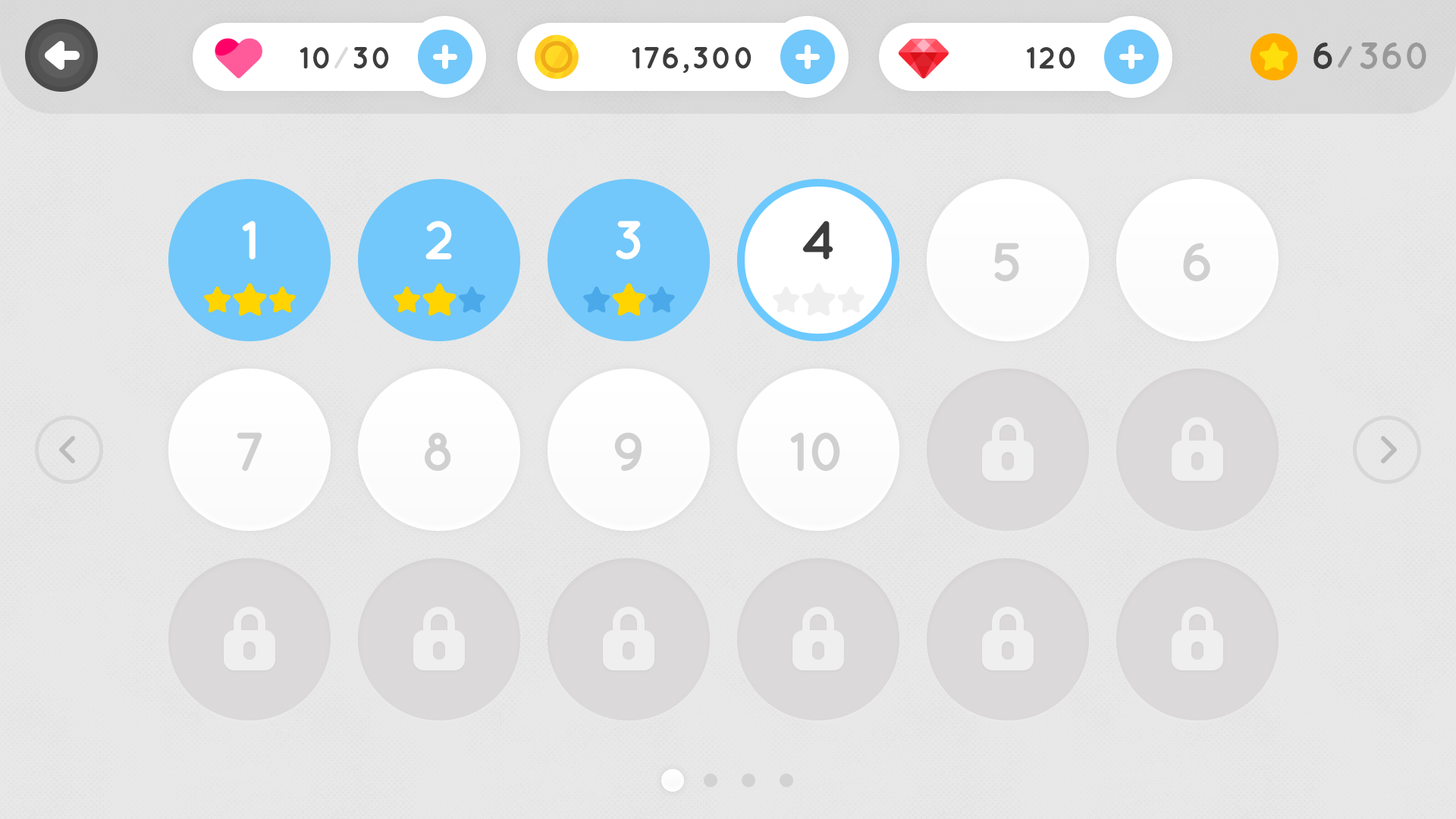
<style>
.page{position:relative;width:1456px;height:819px;background:#e8e8e8}
.page>*{position:absolute;margin:0}
.t1{font:30.3px "Quicksand-Bold";color:#3d3d3d}
.t2{font:37.9px "Quicksand-Bold";color:#3c3c3c}
.t3{font:37.9px "Quicksand-Bold";color:#999999}
.t4{font:54.6px "Quicksand-Bold";color:#ffffff}
.t5{font:54.6px "Quicksand-Bold";color:#3d3d3d}
.t6{font:54.6px "Quicksand-Bold";color:#d0d0d0}
</style>
<div class="page">
<p class="t1" style="left:300px;top:47px;width:89px;height:22px">10  30</p>
<p class="t1" style="left:632px;top:47px;width:119px;height:27px">176,300</p>
<p class="t1" style="left:1027px;top:47px;width:48px;height:22px">120</p>
<p class="t2" style="left:1313px;top:42px;width:19px;height:27px">6</p>
<p class="t3" style="left:1360px;top:42px;width:66px;height:27px">360</p>
<p class="t4" style="left:242px;top:221px;width:14px;height:38px">1</p>
<p class="t4" style="left:425px;top:221px;width:27px;height:38px">2</p>
<p class="t4" style="left:616px;top:221px;width:25px;height:38px">3</p>
<p class="t5" style="left:802px;top:221px;width:31px;height:38px">4</p>
<p class="t6" style="left:994px;top:243px;width:25px;height:38px">5</p>
<p class="t6" style="left:1183px;top:243px;width:27px;height:38px">6</p>
<p class="t6" style="left:237px;top:432px;width:25px;height:39px">7</p>
<p class="t6" style="left:425px;top:432px;width:26px;height:39px">8</p>
<p class="t6" style="left:614px;top:432px;width:28px;height:39px">9</p>
<p class="t6" style="left:790px;top:432px;width:50px;height:39px">10</p>
</div>
